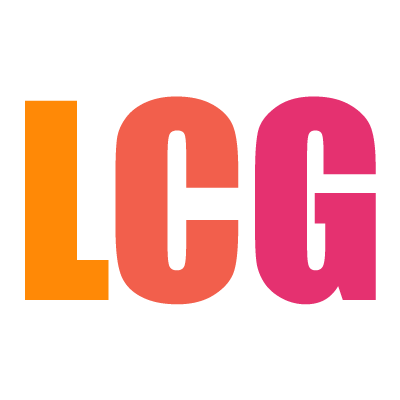
<style>
.page{position:relative;width:400px;height:400px;background:#ffffff}
.page>*{position:absolute;margin:0}
.t1{font:252px "Impact";color:#ff8906}
.t2{font:252px "Impact";color:#f25f4c}
.t3{font:252px "Impact";color:#e53170}
</style>
<div class="page">
<p class="t1" style="left:25px;top:96px;width:351px;height:209px">L<span class="t2">C</span><span class="t3">G</span></p>
</div>
